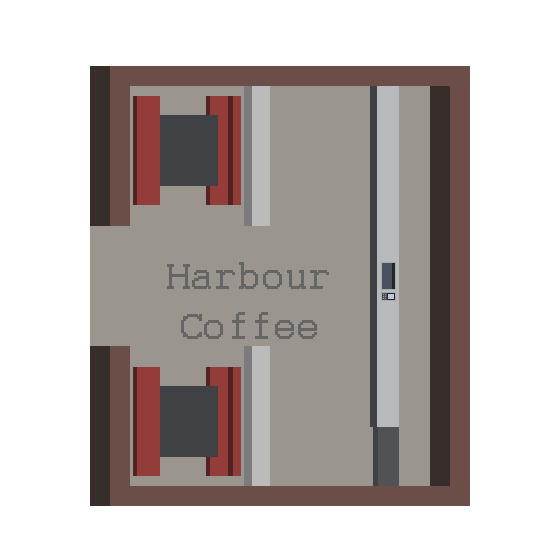
<style>
.page{position:relative;width:556px;height:556px;background:#ffffff}
.page>*{position:absolute;margin:0}
.t1{font:41.7px "Courier";color:#656565;font-weight:bold}
</style>
<div class="page">
<p class="t1" style="left:167px;top:262px;width:162px;height:77px;text-align:center">Harbour <br>Coffee</p>
</div>
